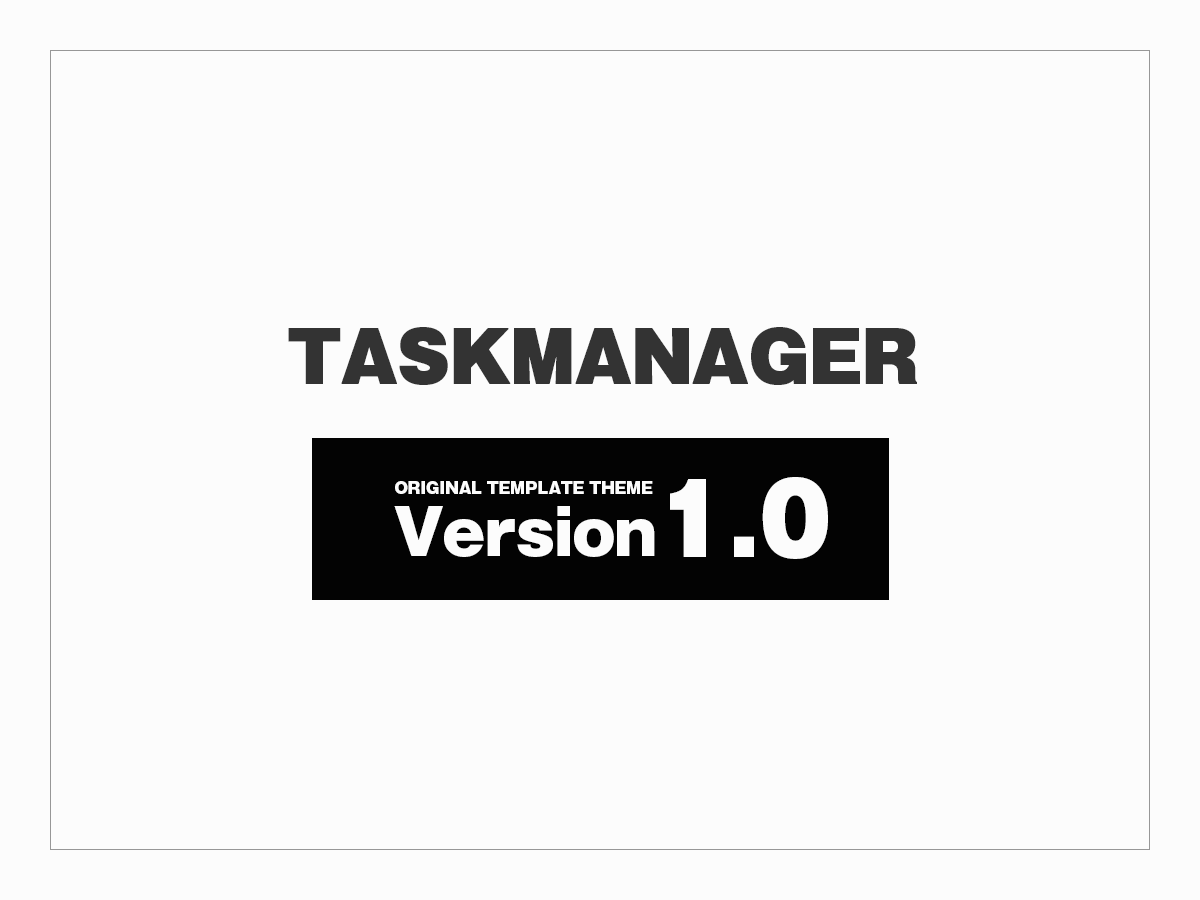
<style>
.page{position:relative;width:1200px;height:900px;background:#fcfcfc}
.page>*{position:absolute;margin:0}
.t1{font:67.1px "GothicMB101Pro-Ultra";color:#333333;font-weight:bold}
.t2{font:15.4px "GothicMB101Pro-Ultra";color:#fcfcfc}
.t3{font:95.1px "GothicMB101Pro-Ultra";color:#fcfcfc}
.t4{font:60.9px "GothicMB101Pro-Ultra";color:#fcfcfc}
</style>
<div class="page">
<p class="t1" style="left:288px;top:327px;width:629px;height:58px">TASKMANAGER</p>
<p class="t2" style="left:395px;top:481px;width:258px;height:13px">ORIGINAL TEMPLATE THEME</p>
<p class="t3" style="left:670px;top:477px;width:158px;height:82px">1.0</p>
<p class="t4" style="left:394px;top:506px;width:261px;height:51px">Version</p>
</div>
